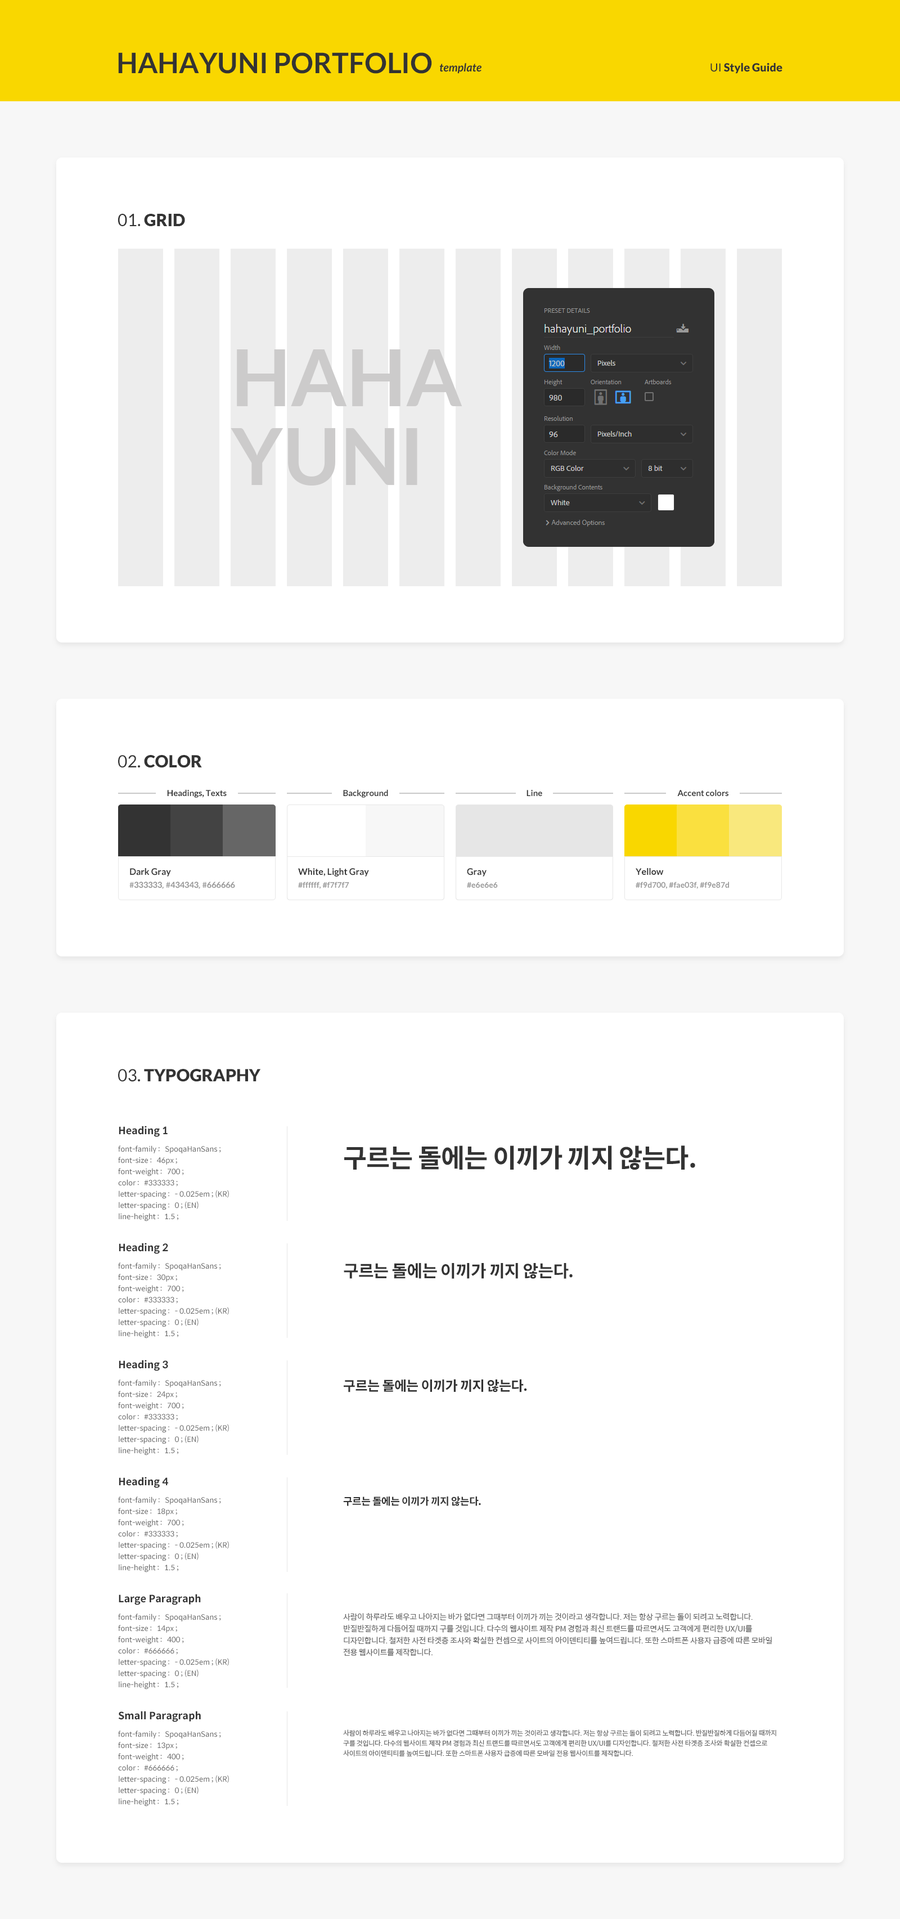
<style>
.page{position:relative;width:900px;height:1919px;background:#ffffff}
.page>*{position:absolute;margin:0}
.t1{font:28.1px "Lato-Bold";color:#333333}
.t2{font:11.2px "Lato-BoldItalic";color:#333333}
.t3{font:11.2px "Lato-Black";color:#333333}
.t4{font:11.2px "Lato-Regular";color:#333333}
.t5{font:16.9px "Lato-Black";color:#333333}
.t6{font:16.9px "Lato-Regular";color:#333333}
.t7{font:78.8px/78.8px "Lato-Bold";color:#cccbcb}
.t8{font:8.4px "Lato-Bold";color:#333333}
.t9{font:9px "Lato-Bold";color:#333333}
.t10{font:7.9px "SpoqaHanSans-Bold";color:#999999}
.t11{font:7.9px "Lato-Bold";color:#999999}
.t12{font:10.1px "SpoqaHanSans-Bold";color:#333333}
.t13{font:7.3px/11.2px "SpoqaHanSans-Regular";color:#666666}
.t14{font:25.9px "SpoqaHanSans-Bold";letter-spacing:-0.025em;color:#333333}
.t15{font:16.9px "SpoqaHanSans-Bold";letter-spacing:-0.025em;color:#333333}
.t16{font:13.5px "SpoqaHanSans-Bold";letter-spacing:-0.025em;color:#333333}
.t17{font:10.1px "SpoqaHanSans-Bold";letter-spacing:-0.025em;color:#333333}
.t18{font:7.9px/11.8px "SpoqaHanSans-Regular";letter-spacing:-0.025em;color:#666666}
.t19{font:6.8px/10.1px "SpoqaHanSans-Regular";letter-spacing:-0.025em;color:#666666}
</style>
<div class="page">
<p class="t1" style="left:118px;top:52px;width:314px;height:22px">HAHAYUNI PORTFOLIO</p>
<p class="t2" style="left:439px;top:63px;width:43px;height:11px">template</p>
<p class="t3" style="left:710px;top:63px;width:72px;height:11px"><span class="t4">UI </span>Style Guide</p>
<p class="t5" style="left:118px;top:214px;width:67px;height:12px"><span class="t6">01. </span>GRID</p>
<p class="t7" style="left:231px;top:349px;width:231px;height:136px">HAHA<br>YUNI</p>
<p class="t5" style="left:118px;top:755px;width:84px;height:13px"><span class="t6">02. </span>COLOR</p>
<p class="t8" style="left:167px;top:789px;width:60px;height:9px">Headings, Texts</p>
<p class="t8" style="left:343px;top:789px;width:45px;height:9px">Background</p>
<p class="t8" style="left:526px;top:790px;width:16px;height:6px">Line</p>
<p class="t8" style="left:677px;top:789px;width:51px;height:7px">Accent colors</p>
<p class="t9" style="left:130px;top:868px;width:41px;height:8px">Dark Gray</p>
<p class="t9" style="left:298px;top:868px;width:71px;height:8px">White, Light Gray</p>
<p class="t9" style="left:467px;top:868px;width:20px;height:8px">Gray</p>
<p class="t9" style="left:636px;top:868px;width:28px;height:7px">Yellow</p>
<p class="t10" style="left:129px;top:881px;width:106px;height:8px">#333333, #434343, #666666</p>
<p class="t11" style="left:298px;top:881px;width:51px;height:8px">#ffffff, #f7f7f7</p>
<p class="t11" style="left:636px;top:881px;width:93px;height:8px">#f9d700, #fae03f, #f9e87d</p>
<p class="t11" style="left:467px;top:882px;width:31px;height:6px">#e6e6e6</p>
<p class="t5" style="left:118px;top:1069px;width:143px;height:13px"><span class="t6">03. </span>TYPOGRAPHY</p>
<p class="t12" style="left:119px;top:1126px;width:49px;height:11px">Heading 1</p>
<p class="t13" style="left:118px;top:1145px;width:111px;height:76px">font-family :   SpoqaHanSans ;<br>font-size :   46px ;<br>font-weight :   700 ;<br>color :   #333333 ;<br>letter-spacing :   - 0.025em ; (KR)<br>letter-spacing :   0 ; (EN)<br>line-height :   1.5 ;</p>
<p class="t14" style="left:344px;top:1145px;width:351px;height:25px">구르는 돌에는 이끼가 끼지 않는다.</p>
<p class="t12" style="left:119px;top:1243px;width:49px;height:11px">Heading 2</p>
<p class="t13" style="left:118px;top:1262px;width:111px;height:76px">font-family :   SpoqaHanSans ;<br>font-size :   30px ;<br>font-weight :   700 ;<br>color :   #333333 ;<br>letter-spacing :   - 0.025em ; (KR)<br>letter-spacing :   0 ; (EN)<br>line-height :   1.5 ;</p>
<p class="t15" style="left:344px;top:1263px;width:229px;height:16px">구르는 돌에는 이끼가 끼지 않는다.</p>
<p class="t12" style="left:119px;top:1360px;width:49px;height:11px">Heading 3</p>
<p class="t13" style="left:118px;top:1379px;width:111px;height:76px">font-family :   SpoqaHanSans ;<br>font-size :   24px ;<br>font-weight :   700 ;<br>color :   #333333 ;<br>letter-spacing :   - 0.025em ; (KR)<br>letter-spacing :   0 ; (EN)<br>line-height :   1.5 ;</p>
<p class="t16" style="left:344px;top:1379px;width:183px;height:13px">구르는 돌에는 이끼가 끼지 않는다.</p>
<p class="t12" style="left:119px;top:1477px;width:49px;height:11px">Heading 4</p>
<p class="t13" style="left:118px;top:1496px;width:111px;height:76px">font-family :   SpoqaHanSans ;<br>font-size :   18px ;<br>font-weight :   700 ;<br>color :   #333333 ;<br>letter-spacing :   - 0.025em ; (KR)<br>letter-spacing :   0 ; (EN)<br>line-height :   1.5 ;</p>
<p class="t17" style="left:343px;top:1496px;width:138px;height:10px">구르는 돌에는 이끼가 끼지 않는다.</p>
<p class="t12" style="left:119px;top:1594px;width:82px;height:11px">Large Paragraph</p>
<p class="t13" style="left:118px;top:1613px;width:111px;height:76px">font-family :   SpoqaHanSans ;<br>font-size :   14px ;<br>font-weight :   400 ;<br>color :   #666666 ;<br>letter-spacing :   - 0.025em ; (KR)<br>letter-spacing :   0 ; (EN)<br>line-height :   1.5 ;</p>
<p class="t18" style="left:343px;top:1613px;width:429px;height:43px">사람이 하루라도 배우고 나아지는 바가 없다면 그때부터 이끼가 끼는 것이라고 생각합니다. 저는 항상 구르는 돌이 되려고 노력합니다. 반질반질하게 다듬어질 때까지 구를 것입니다. 다수의 웹사이트 제작 PM 경험과 최신 트랜드를 따르면서도 고객에게 편리한 UX/UI를 디자인합니다. 철저한 사전 타겟층 조사와 확실한 컨셉으로 사이트의 아이덴티티를 높여드립니다. 또한 스마트폰 사용자 급증에 따른 모바일 전용 웹사이트를 제작합니다.</p>
<p class="t12" style="left:118px;top:1711px;width:83px;height:11px">Small Paragraph</p>
<p class="t13" style="left:118px;top:1730px;width:111px;height:76px">font-family :   SpoqaHanSans ;<br>font-size :   13px ;<br>font-weight :   400 ;<br>color :   #666666 ;<br>letter-spacing :   - 0.025em ; (KR)<br>letter-spacing :   0 ; (EN)<br>line-height :   1.5 ;</p>
<p class="t19" style="left:343px;top:1729px;width:433px;height:27px">사람이 하루라도 배우고 나아지는 바가 없다면 그때부터 이끼가 끼는 것이라고 생각합니다. 저는 항상 구르는 돌이 되려고 노력합니다. 반질반질하게 다듬어질 때까지 구를 것입니다. 다수의 웹사이트 제작 PM 경험과 최신 트랜드를 따르면서도 고객에게 편리한 UX/UI를 디자인합니다. 철저한 사전 타겟층 조사와 확실한 컨셉으로 사이트의 아이덴티티를 높여드립니다. 또한 스마트폰 사용자 급증에 따른 모바일 전용 웹사이트를 제작합니다.</p>
</div>
